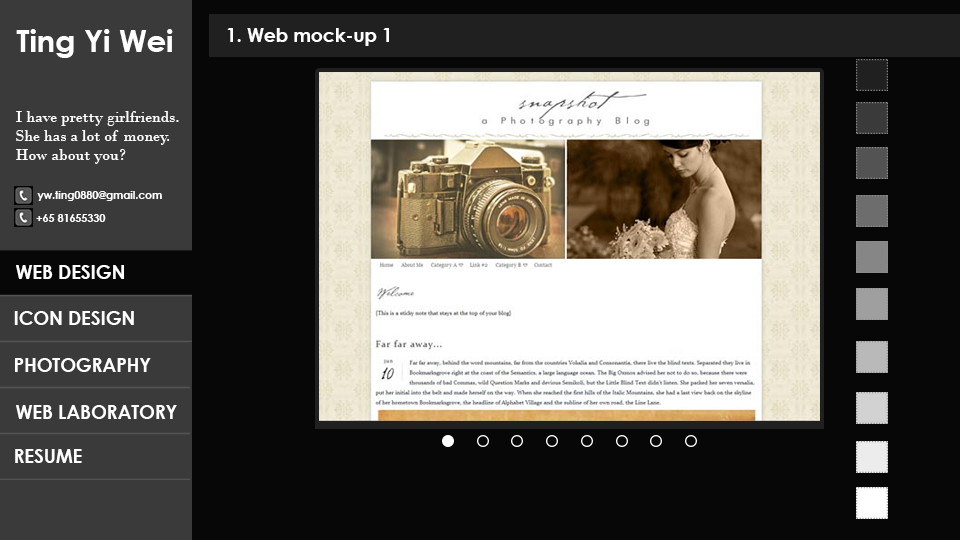
<style>
.page{position:relative;width:960px;height:540px;background:#070707}
.page>*{position:absolute;margin:0}
.t1{font:30.7px "CenturyGothic-Bold";color:#ffffff}
.t2{font:18.7px "CenturyGothic-Bold";color:#ffffff}
.t3{font:16px "BodoniMT";color:#ffffff}
.t4{font:10.7px "CenturyGothic-Bold";color:#ffffff}
</style>
<div class="page">
<p class="t1" style="left:16px;top:29px;width:157px;height:29px">Ting Yi Wei</p>
<p class="t2" style="left:227px;top:28px;width:162px;height:18px">1. Web mock-up 1</p>
<p class="t3" style="left:16px;top:111px;width:163px;height:53px">I have pretty girlfriends.<br>She has a lot of money. <br>How about you?</p>
<p class="t4" style="left:37px;top:191px;width:125px;height:10px">yw.ting0880@gmail.com</p>
<p class="t4" style="left:36px;top:214px;width:70px;height:8px">+65 81655330</p>
<p class="t2" style="left:16px;top:265px;width:108px;height:14px">WEB DESIGN</p>
<p class="t2" style="left:14px;top:311px;width:120px;height:14px">ICON DESIGN</p>
<p class="t2" style="left:15px;top:358px;width:136px;height:14px">PHOTOGRAPHY</p>
<p class="t2" style="left:16px;top:405px;width:161px;height:14px">WEB LABORATORY</p>
<p class="t2" style="left:15px;top:449px;width:67px;height:14px">RESUME</p>
</div>
